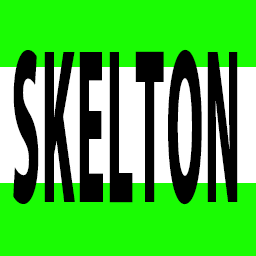
<style>
.page{position:relative;width:256px;height:256px;background:#1afc03}
.page>*{position:absolute;margin:0}
.t1{font:194px "KozGoPr6N-Heavy";letter-spacing:0.025em;color:#000000;scale:0.27 1}
</style>
<div class="page">
<p class="t1" style="left:13px;top:49px;width:225px;height:156px">SKELTON</p>
</div>
